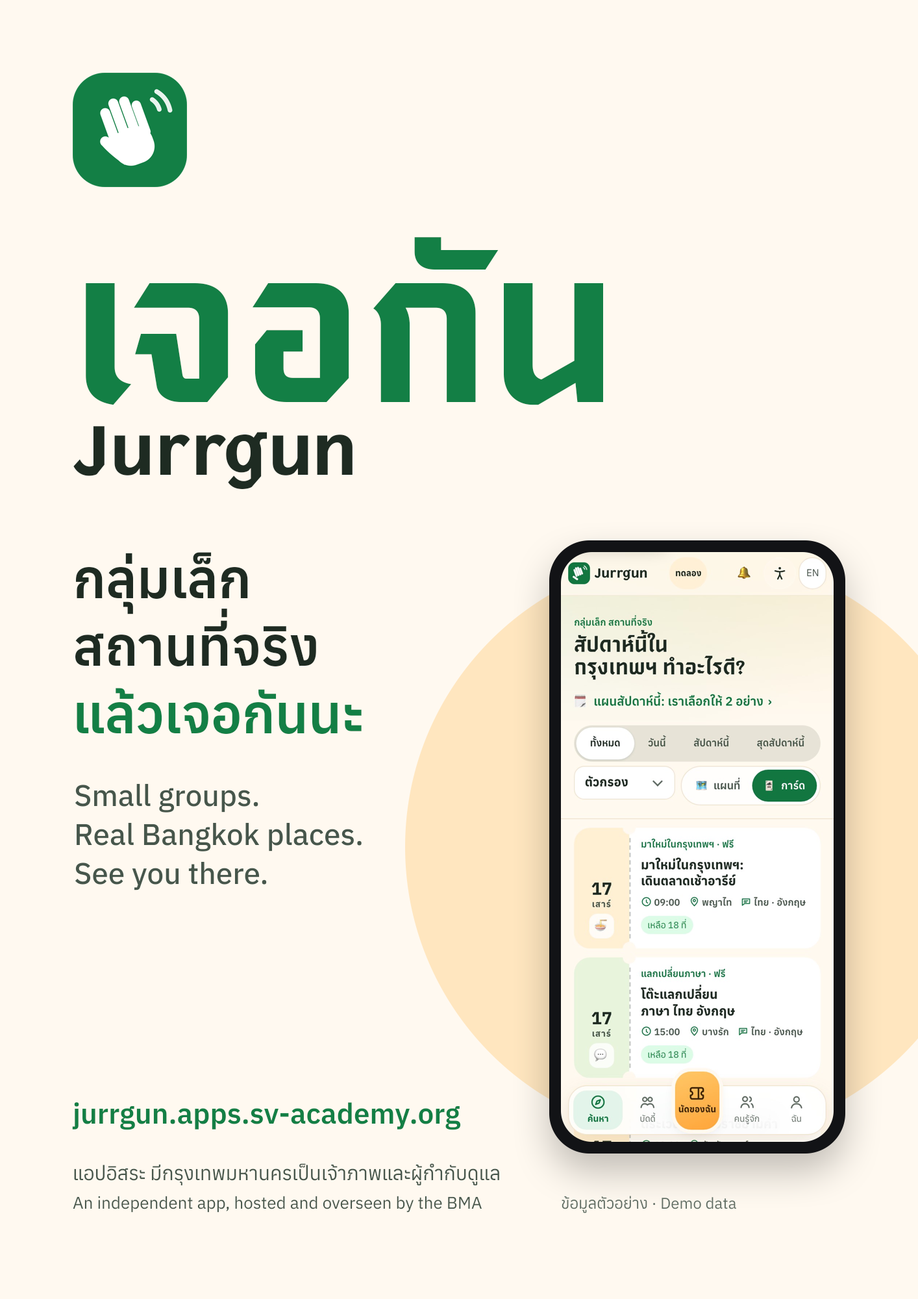
<style>
.page{position:relative;width:918px;height:1299px;background:#fff9f0}
.page>*{position:absolute;margin:0}
.t1{font:194.8px "SaoChingcha-Bold";color:#137f45}
.t2{font:71.4px "SaoChingcha-Bold";color:#1e2b22}
.t3{font:53.2px "Anuphan-SemiBold";color:#1e2b22}
.t4{font:53.2px "Anuphan-SemiBold";color:#137f45}
.t5{font:29.9px "Anuphan-Medium";color:#46564b}
.t6{font:28.6px "Anuphan-SemiBold";color:#137f45}
.t7{font:19.5px "Anuphan-Regular";color:#46564b}
.t8{font:16.9px "Anuphan-Regular";color:#46564b}
.t9{font:15.6px "Anuphan-Regular";color:#5f6d63}
</style>
<div class="page">
<p class="t1" style="left:85px;top:237px;width:519px;height:169px">เจอกัน</p>
<p class="t2" style="left:73px;top:426px;width:280px;height:64px">Jurrgun</p>
<p class="t3" style="left:75px;top:552px;width:174px;height:63px">กลุ่มเล็ก</p>
<p class="t3" style="left:75px;top:608px;width:242px;height:59px">สถานที่จริง</p>
<p class="t4" style="left:76px;top:688px;width:286px;height:46px">แล้วเจอกันนะ</p>
<p class="t5" style="left:74px;top:783px;width:185px;height:30px">Small groups.</p>
<p class="t5" style="left:76px;top:822px;width:286px;height:30px">Real Bangkok places.</p>
<p class="t5" style="left:74px;top:861px;width:194px;height:30px">See you there.</p>
<p class="t6" style="left:71px;top:1102px;width:391px;height:29px">jurrgun.apps.sv-academy.org</p>
<p class="t7" style="left:73px;top:1163px;width:427px;height:23px">แอปอิสระ มีกรุงเทพมหานครเป็นเจ้าภาพและผู้กำกับดูแล</p>
<p class="t8" style="left:72px;top:1195px;width:411px;height:18px">An independent app, hosted and overseen by the BMA</p>
<p class="t9" style="left:561px;top:1195px;width:176px;height:19px">ข้อมูลตัวอย่าง · Demo data</p>
</div>
